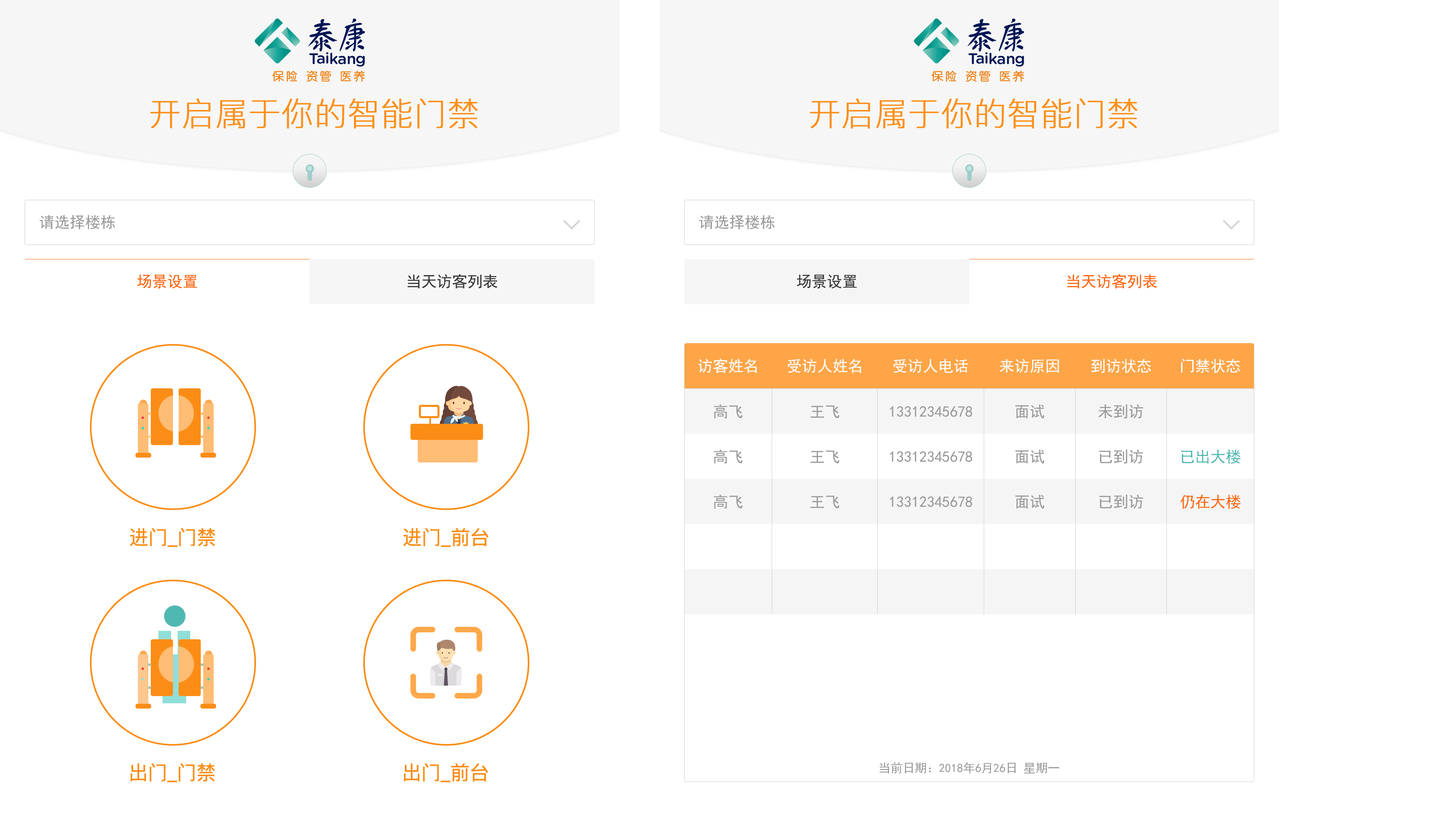
<style>
.page{position:relative;width:1445px;height:825px;background:#ffffff}
.page>*{position:absolute;margin:0}
.t1{font:32.2px "PingFangSC-Thin";color:#fe8f19;font-weight:bold}
.t2{font:15.3px "SimHei";color:#999999}
.t3{font:15.3px "SimHei";color:#ff6405}
.t4{font:15.3px "SimHei";color:#333333}
.t5{font:15.3px "SimHei";color:#ffffff}
.t6{font:15.3px "SimHei";color:#4fb8b0}
.t7{font:19.3px "PingFangSC-Regular";color:#fb8d16}
.t8{font:12.1px "SimHei";color:#999999}
</style>
<div class="page">
<p class="t1" style="left:150px;top:98px;width:328px;height:31px">开启属于你的智能门禁</p>
<p class="t1" style="left:810px;top:98px;width:327px;height:31px">开启属于你的智能门禁</p>
<p class="t2" style="left:39px;top:215px;width:76px;height:14px">请选择楼栋</p>
<p class="t2" style="left:699px;top:215px;width:76px;height:14px">请选择楼栋</p>
<p class="t3" style="left:137px;top:274px;width:60px;height:15px">场景设置</p>
<p class="t4" style="left:407px;top:274px;width:90px;height:15px">当天访客列表</p>
<p class="t4" style="left:796px;top:274px;width:60px;height:15px">场景设置</p>
<p class="t3" style="left:1067px;top:274px;width:90px;height:15px">当天访客列表</p>
<p class="t5" style="left:698px;top:359px;width:59px;height:14px">访客姓名</p>
<p class="t5" style="left:788px;top:359px;width:73px;height:14px">受访人姓名</p>
<p class="t5" style="left:893px;top:359px;width:75px;height:14px">受访人电话</p>
<p class="t5" style="left:1000px;top:359px;width:59px;height:14px">来访原因</p>
<p class="t5" style="left:1091px;top:359px;width:60px;height:14px">到访状态</p>
<p class="t5" style="left:1181px;top:359px;width:59px;height:14px">门禁状态</p>
<p class="t2" style="left:713px;top:405px;width:29px;height:14px">高飞</p>
<p class="t2" style="left:810px;top:405px;width:29px;height:13px">王飞</p>
<p class="t2" style="left:890px;top:406px;width:82px;height:11px">13312345678</p>
<p class="t2" style="left:1015px;top:405px;width:29px;height:14px">面试</p>
<p class="t2" style="left:1098px;top:404px;width:45px;height:15px">未到访</p>
<p class="t2" style="left:713px;top:450px;width:29px;height:14px">高飞</p>
<p class="t2" style="left:1015px;top:450px;width:29px;height:14px">面试</p>
<p class="t2" style="left:1099px;top:449px;width:44px;height:15px">已到访</p>
<p class="t6" style="left:1181px;top:450px;width:59px;height:14px">已出大楼</p>
<p class="t2" style="left:810px;top:451px;width:29px;height:13px">王飞</p>
<p class="t2" style="left:890px;top:451px;width:82px;height:11px">13312345678</p>
<p class="t2" style="left:713px;top:495px;width:29px;height:14px">高飞</p>
<p class="t2" style="left:810px;top:496px;width:29px;height:13px">王飞</p>
<p class="t2" style="left:890px;top:497px;width:82px;height:10px">13312345678</p>
<p class="t2" style="left:1015px;top:495px;width:29px;height:14px">面试</p>
<p class="t2" style="left:1099px;top:495px;width:44px;height:14px">已到访</p>
<p class="t3" style="left:1180px;top:495px;width:60px;height:14px">仍在大楼</p>
<p class="t7" style="left:130px;top:528px;width:85px;height:19px">进门_门禁</p>
<p class="t7" style="left:403px;top:528px;width:86px;height:19px">进门_前台</p>
<p class="t7" style="left:130px;top:763px;width:85px;height:20px">出门_门禁</p>
<p class="t7" style="left:403px;top:763px;width:85px;height:20px">出门_前台</p>
<p class="t8" style="left:879px;top:763px;width:180px;height:11px">当前日期：2018年6月26日 星期一</p>
</div>
